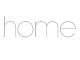
<style>
.page{position:relative;width:80px;height:60px;background:#ffffff}
.page>*{position:absolute;margin:0}
.t1{font:20.8px "BondoluoPeek";color:#a7a7a7}
</style>
<div class="page">
<p class="t1" style="left:4px;top:16px;width:72px;height:22px">HOME</p>
</div>
